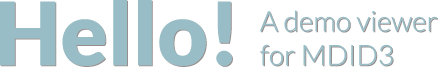
<style>
.page{position:relative;width:440px;height:68px;background:#ffffff}
.page>*{position:absolute;margin:0}
.t1{font:87px "Lato-Black";color:#98bdc6}
.t2{font:28.2px "Lato-Light";color:#98bdc6}
</style>
<div class="page">
<p class="t1" style="left:0px;top:0px;width:232px;height:66px">Hello!</p>
<p class="t2" style="left:259px;top:10px;width:178px;height:56px">A demo viewer<br>for MDID3</p>
</div>
